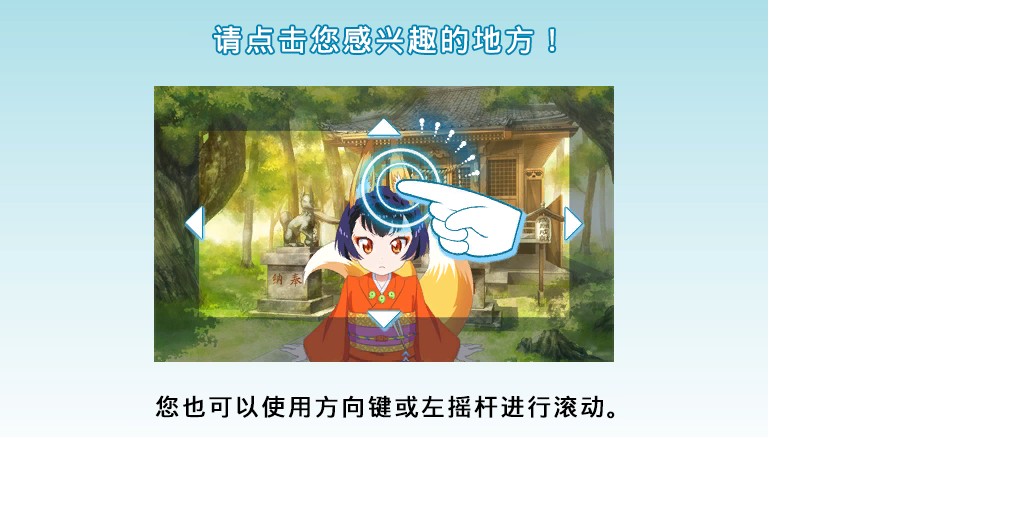
<style>
.page{position:relative;width:1024px;height:512px;background:#ffffff}
.page>*{position:absolute;margin:0}
.t1{font:29.3px "WenQuanYiMicroHeiMono";letter-spacing:0.08em;color:#ffffff;font-weight:bold}
.t2{font:24px "WenQuanYiMicroHeiMono";letter-spacing:0.08em;color:#000000;font-weight:bold}
</style>
<div class="page">
<p class="t1" style="left:214px;top:26px;width:341px;height:28px">请点击您感兴趣的地方！</p>
<p class="t2" style="left:155px;top:395px;width:460px;height:24px">您也可以使用方向键或左摇杆进行滚动。</p>
</div>
